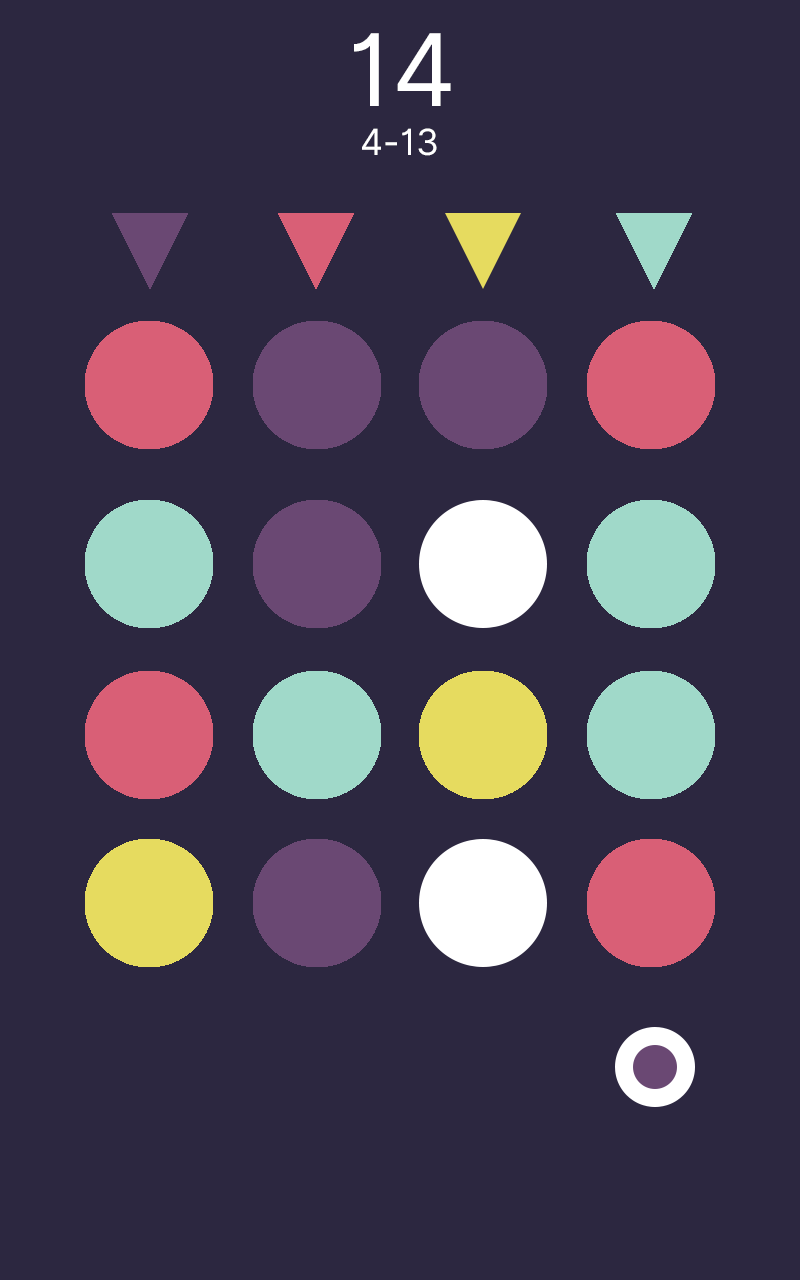
<style>
.page{position:relative;width:800px;height:1280px;background:#2c2740}
.page>*{position:absolute;margin:0}
.t1{font:100px "Inter-Regular";color:#ffffff}
.t2{font:36px "Inter-Regular";color:#ffffff}
</style>
<div class="page">
<p class="t1" style="left:354px;top:33px;width:97px;height:73px">14</p>
<p class="t2" style="left:362px;top:128px;width:75px;height:28px">4-13</p>
</div>
